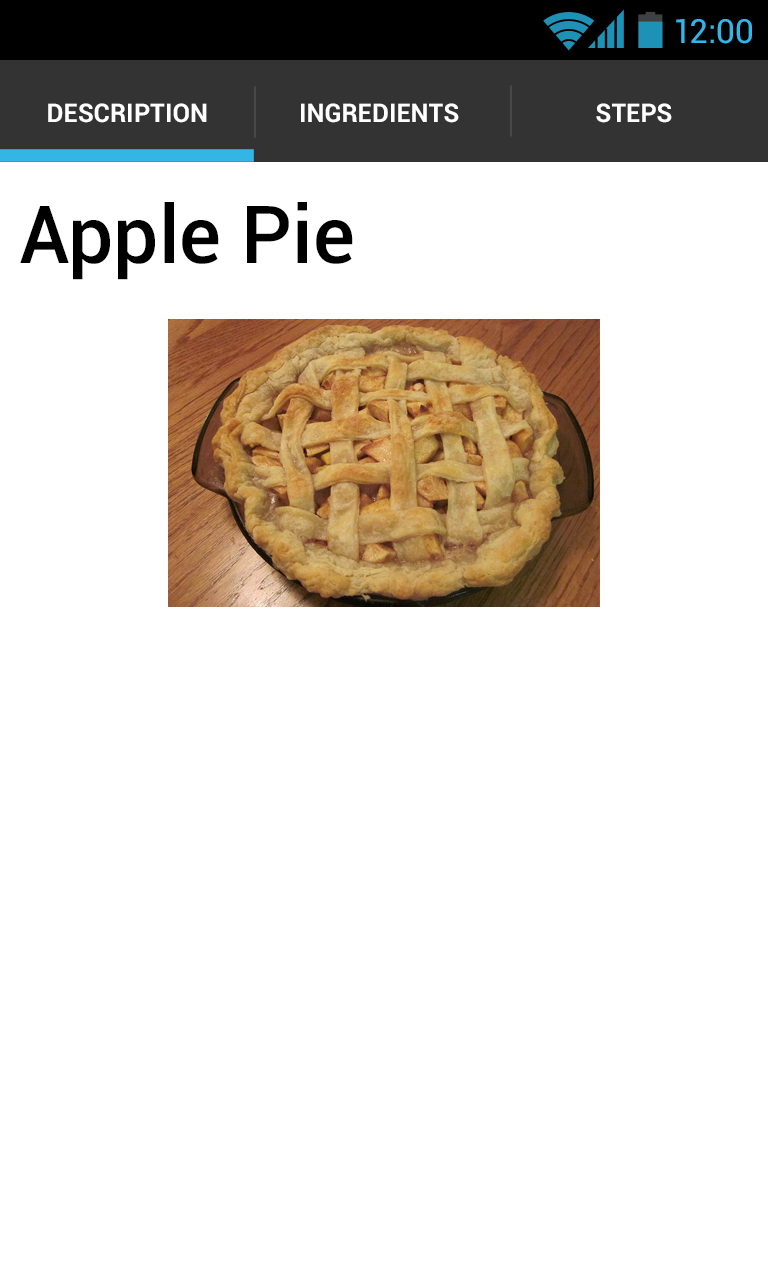
<style>
.page{position:relative;width:768px;height:1280px;background:#ffffff}
.page>*{position:absolute;margin:0}
.t1{font:33.6px "Roboto-Regular";color:#33b5e5}
.t2{font:25.5px "Roboto-Bold";color:#ffffff}
.t3{font:80px "Roboto-Medium";color:#000000}
</style>
<div class="page">
<p class="t1" style="left:676px;top:19px;width:76px;height:25px">12:00</p>
<p class="t2" style="left:48px;top:103px;width:159px;height:20px">DESCRIPTION</p>
<p class="t2" style="left:301px;top:103px;width:158px;height:20px">INGREDIENTS</p>
<p class="t2" style="left:596px;top:103px;width:76px;height:20px">STEPS</p>
<p class="t3" style="left:20px;top:202px;width:333px;height:78px">Apple Pie</p>
</div>
